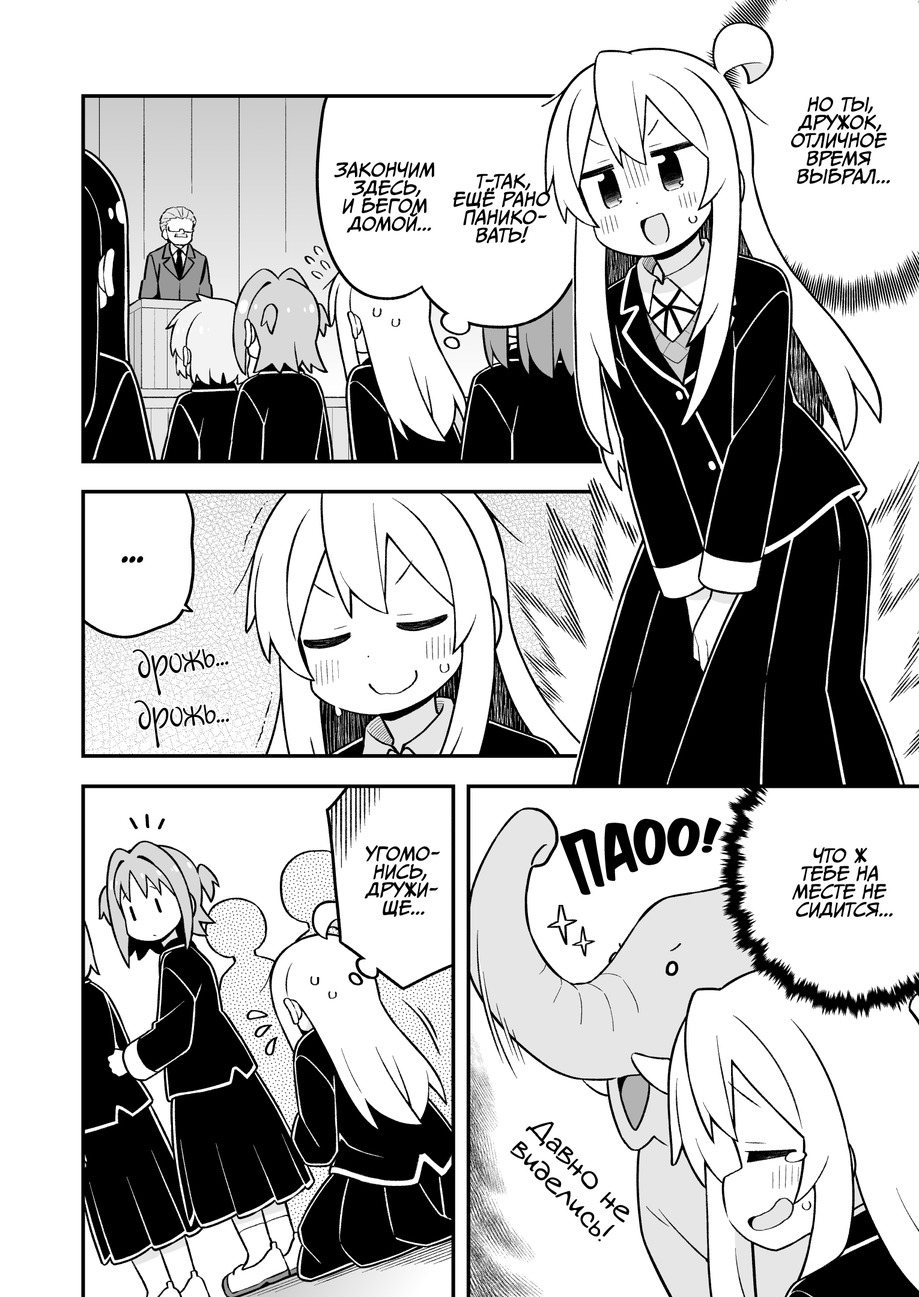
<style>
.page{position:relative;width:919px;height:1297px;background:#ffffff}
.page>*{position:absolute;margin:0}
.t1{font:18px "CCMeanwhile";color:#000000;text-transform:uppercase;font-style:italic}
.t2{font:36px "AkbarPlain";color:#000000}
.t3{font:39.6px "JakobCTT-Regular";color:#000000;scale:0.8 1}
.t4{font:54.1px "KomikaTitle-AxisRUS-LAT";color:#000000;scale:0.8 1}
.t5{font:28.8px "v_Augie";color:#000000}
</style>
<div class="page">
<p class="t1" style="left:791px;top:96px;width:99px;height:89px;text-align:center">Но ты,<br>дружок,<br>отличное<br>время<br>выбрал...</p>
<p class="t1" style="left:334px;top:162px;width:100px;height:71px;text-align:center">Закончим<br>здесь,<br>и бегом<br>домой...</p>
<p class="t1" style="left:454px;top:173px;width:96px;height:70px;text-align:center">Т-так,<br>ещё рано<br>панико-<br>вать!</p>
<p class="t2" style="left:121px;top:556px;width:23px;height:7px">...</p>
<p class="t3" style="left:133px;top:649px;width:95px;height:47px;rotate:-9deg">дрожь...</p>
<p class="t3" style="left:135px;top:700px;width:94px;height:48px;rotate:-5deg">дрожь...</p>
<p class="t4" style="left:560px;top:818px;width:161px;height:78px;rotate:-13deg">паоо!</p>
<p class="t1" style="left:365px;top:845px;width:75px;height:72px;text-align:center">Угомо-<br>нись,<br>дружи-<br>ще...</p>
<p class="t1" style="left:792px;top:848px;width:101px;height:71px;text-align:center">Что ж<br>тебе на<br>месте не<br>сидится...</p>
<p class="t5" style="left:510px;top:1122px;width:120px;height:120px;text-align:center;rotate:45deg">Давно не<br>виделись!</p>
</div>
